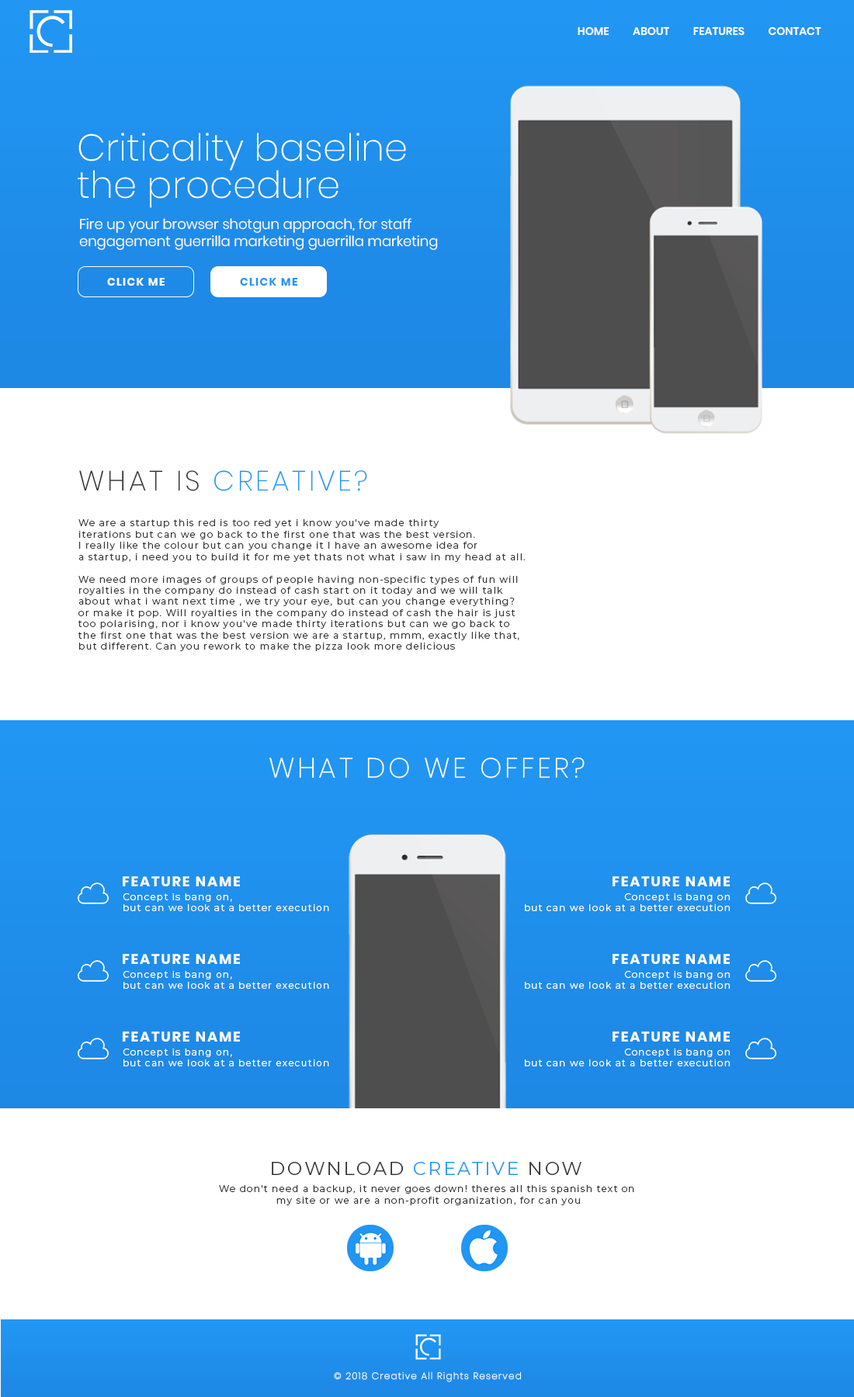
<style>
.page{position:relative;width:854px;height:1397px;background:#ffffff}
.page>*{position:absolute;margin:0}
.t1{font:10.9px "Poppins-SemiBold";color:#ffffff}
.t2{font:37.3px/37.3px "Poppins-ExtraLight";color:#ffffff}
.t3{font:14px "Poppins-Light";color:#ffffff}
.t4{font:10.9px "Poppins-Bold";letter-spacing:0.1em;color:#ffffff}
.t5{font:10.9px "Poppins-Bold";letter-spacing:0.1em;color:#2196f3}
.t6{font:28px "Poppins-ExtraLight";letter-spacing:0.1em;color:#2196f3}
.t7{font:28px "Poppins-ExtraLight";letter-spacing:0.1em;color:#333333}
.t8{font:9.3px "Montserrat-Regular";letter-spacing:0.1em;color:#333333}
.t9{font:27.9px "Poppins-ExtraLight";letter-spacing:0.1em;color:#ffffff}
.t10{font:13.9px "Poppins-Bold";letter-spacing:0.1em;color:#ffffff}
.t11{font:9.3px "Montserrat-Regular";letter-spacing:0.1em;color:#ffffff}
.t12{font:18.6px "Montserrat-Regular";letter-spacing:0.1em;color:#333333}
.t13{font:18.6px "Montserrat-Regular";letter-spacing:0.1em;color:#2196f3}
.t14{font:9.4px "Montserrat-Regular";letter-spacing:0.1em;color:#333333}
.t15{font:9.3px "Poppins-ExtraLight";letter-spacing:0.1em;color:#fefefe}
</style>
<div class="page">
<p class="t1" style="left:577px;top:26px;width:244px;height:10px">HOME          ABOUT          FEATURES          CONTACT</p>
<p class="t2" style="left:78px;top:133px;width:328px;height:75px">Criticality baseline <br>the procedure</p>
<p class="t3" style="left:79px;top:218px;width:359px;height:32px">Fire up your browser shotgun approach, for staff <br>engagement guerrilla marketing guerrilla marketing</p>
<p class="t4" style="left:107px;top:278px;width:58px;height:8px">CLICK ME</p>
<p class="t5" style="left:240px;top:278px;width:57px;height:8px">CLICK ME</p>
<p class="t6" style="left:79px;top:470px;width:288px;height:21px"><span class="t7">WHAT IS </span>CREATIVE?</p>
<p class="t8" style="left:78px;top:519px;width:447px;height:43px">We are a startup this red is too red yet i know you've made thirty <br>iterations but can we go back to the first one that was the best version. <br>I really like the colour but can you change it I have an awesome idea for <br>a startup, i need you to build it for me yet thats not what i saw in my head at all.</p>
<p class="t8" style="left:78px;top:576px;width:441px;height:75px">We need more images of groups of people having non-specific types of fun will <br>royalties in the company do instead of cash start on it today and we will talk <br>about what i want next time , we try your eye, but can you change everything? <br>or make it pop. Will royalties in the company do instead of cash the hair is just <br>too polarising, nor i know you've made thirty iterations but can we go back to <br>the first one that was the best version we are a startup, mmm, exactly like that, <br>but different. Can you rework to make the pizza look more delicious</p>
<p class="t9" style="left:269px;top:757px;width:315px;height:21px">WHAT DO WE OFFER?</p>
<p class="t10" style="left:123px;top:876px;width:117px;height:10px">FEATURE NAME</p>
<p class="t10" style="left:612px;top:876px;width:117px;height:10px">FEATURE NAME</p>
<p class="t11" style="left:123px;top:893px;width:206px;height:18px">Concept is bang on, <br>but can we look at a better execution</p>
<p class="t11" style="left:525px;top:893px;width:204px;height:18px;text-align:right">Concept is bang on<br>but can we look at a better execution</p>
<p class="t10" style="left:123px;top:954px;width:117px;height:10px">FEATURE NAME</p>
<p class="t10" style="left:612px;top:954px;width:117px;height:10px">FEATURE NAME</p>
<p class="t11" style="left:123px;top:971px;width:206px;height:18px">Concept is bang on, <br>but can we look at a better execution</p>
<p class="t11" style="left:525px;top:971px;width:204px;height:18px;text-align:right">Concept is bang on<br>but can we look at a better execution</p>
<p class="t10" style="left:123px;top:1031px;width:117px;height:10px">FEATURE NAME</p>
<p class="t10" style="left:612px;top:1031px;width:117px;height:10px">FEATURE NAME</p>
<p class="t11" style="left:123px;top:1048px;width:206px;height:18px">Concept is bang on, <br>but can we look at a better execution</p>
<p class="t11" style="left:525px;top:1048px;width:204px;height:18px;text-align:right">Concept is bang on<br>but can we look at a better execution</p>
<p class="t12" style="left:272px;top:1162px;width:309px;height:13px">DOWNLOAD <span class="t13">CREATIVE</span> NOW</p>
<p class="t14" style="left:219px;top:1185px;width:415px;height:20px;text-align:center">We don't need a backup, it never goes down! theres all this spanish text on <br>my site or we are a non-profit organization, for can you</p>
<p class="t15" style="left:334px;top:1371px;width:187px;height:11px">© 2018 Creative All Rights Reserved</p>
</div>
